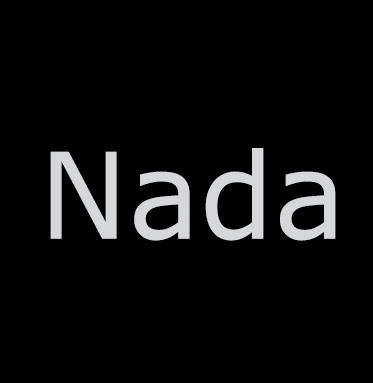
<style>
.page{position:relative;width:373px;height:383px;background:#000000}
.page>*{position:absolute;margin:0}
.t1{font:119.1px "Verdana";color:#d5d7d8}
</style>
<div class="page">
<p class="t1" style="left:50px;top:148px;width:286px;height:93px">Nada</p>
</div>
